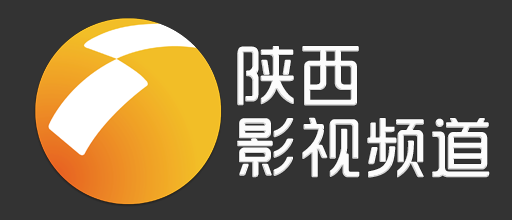
<style>
.page{position:relative;width:512px;height:220px;background:#333333}
.page>*{position:absolute;margin:0}
.t1{font:65px/72px "SJyunlvyuan";color:#fdfdfd}
</style>
<div class="page">
<p class="t1" style="left:237px;top:46px;width:253px;height:132px">陕西<br>影视频道</p>
</div>
